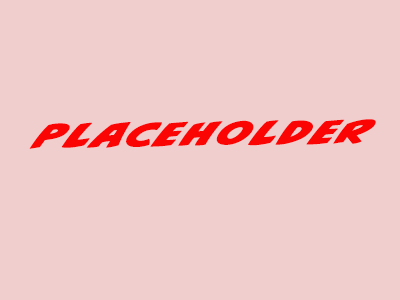
<style>
.page{position:relative;width:400px;height:300px;background:#f1cece}
.page>*{position:absolute;margin:0}
.t1{font:29.2px "CCBiffBamBoom";letter-spacing:0.025em;color:#fb0404;font-weight:bold;scale:1.78 1}
</style>
<div class="page">
<p class="t1" style="left:29px;top:119px;width:347px;height:30px;rotate:-1deg">Placeholder</p>
</div>
